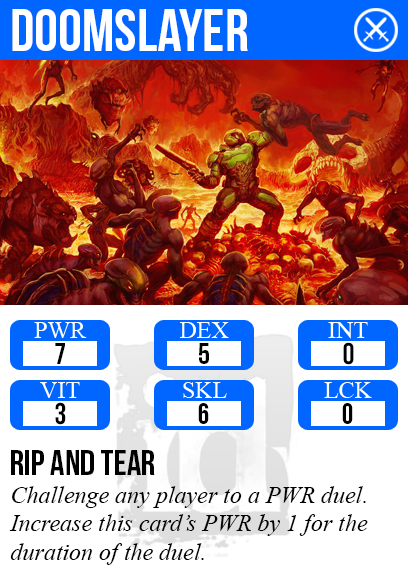
<style>
.page{position:relative;width:408px;height:585px;background:#ffffff}
.page>*{position:absolute;margin:0}
.t1{font:60px "BebasNeue";color:#ffffff}
.t2{font:29.9px "BebasNeue";color:#000000}
.t3{font:36px "BebasNeue";color:#000000}
.t4{font:24px "TimesNewRomanPS-ItalicMT";color:#000000}
</style>
<div class="page">
<p class="t1" style="left:12px;top:9px;width:236px;height:42px">Doomslayer</p>
<p class="t2" style="left:343px;top:342px;width:11px;height:23px">0</p>
<p class="t2" style="left:55px;top:343px;width:10px;height:21px">7</p>
<p class="t2" style="left:199px;top:343px;width:10px;height:21px">5</p>
<p class="t2" style="left:55px;top:402px;width:11px;height:23px">3</p>
<p class="t2" style="left:198px;top:403px;width:11px;height:21px">6</p>
<p class="t2" style="left:342px;top:403px;width:11px;height:21px">0</p>
<p class="t3" style="left:11px;top:450px;width:144px;height:25px">rip and tear</p>
<p class="t4" style="left:9px;top:486px;width:359px;height:79px">Challenge any player to a PWR duel.<br>Increase this card’s PWR by 1 for the<br>duration of the duel.</p>
</div>
